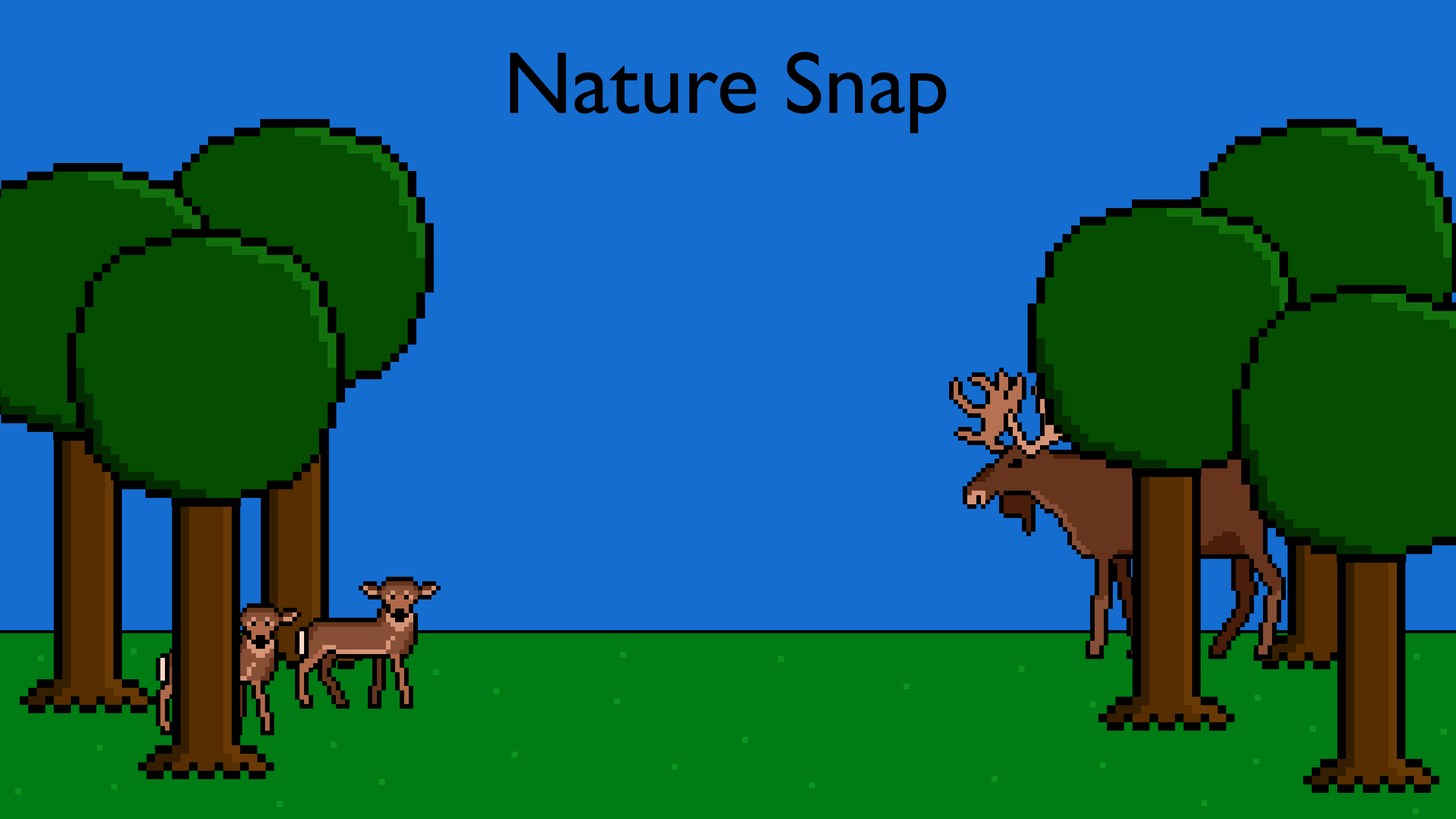
<style>
.page{position:relative;width:1456px;height:819px;background:#156dd0}
.page>*{position:absolute;margin:0}
.t1{font:88.4px "GillSansMT";color:#000000}
</style>
<div class="page">
<p class="t1" style="left:510px;top:52px;width:436px;height:81px">Nature Snap</p>
</div>
